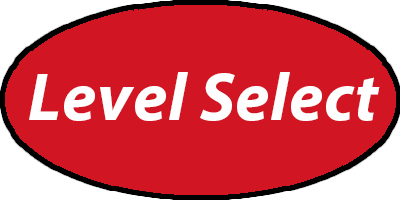
<style>
.page{position:relative;width:400px;height:200px;background:#d21522}
.page>*{position:absolute;margin:0}
.t1{font:68.2px "MyriadPro-BoldIt";letter-spacing:0.01em;color:#fefefe}
</style>
<div class="page">
<p class="t1" style="left:29px;top:72px;width:351px;height:49px">Level Select</p>
</div>
